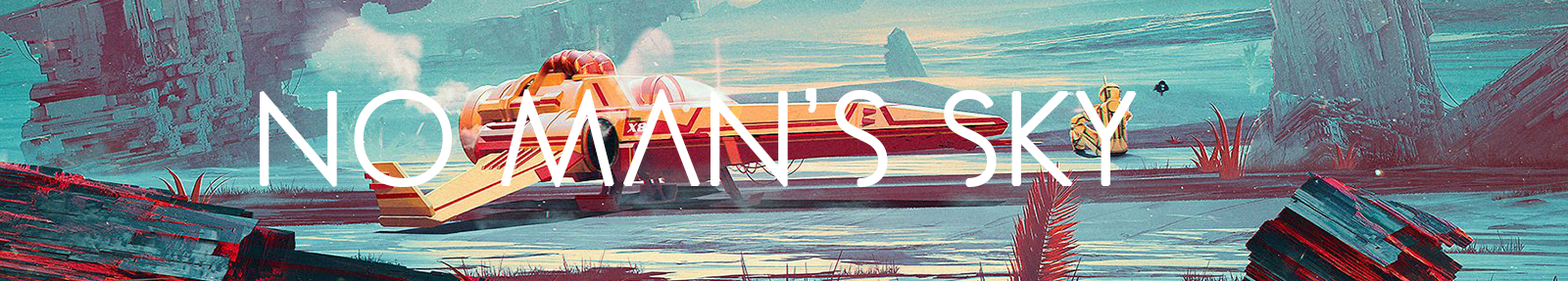
<style>
.page{position:relative;width:1568px;height:281px}
.page>*{position:absolute;margin:0}
.t1{font:127.4px "GeosansLight-NMS";letter-spacing:0.025em;color:#ffffff;font-weight:bold}
</style>
<div class="page">
<p class="t1" style="left:260px;top:88px;width:877px;height:100px">NO MAN’S SKY</p>
</div>
